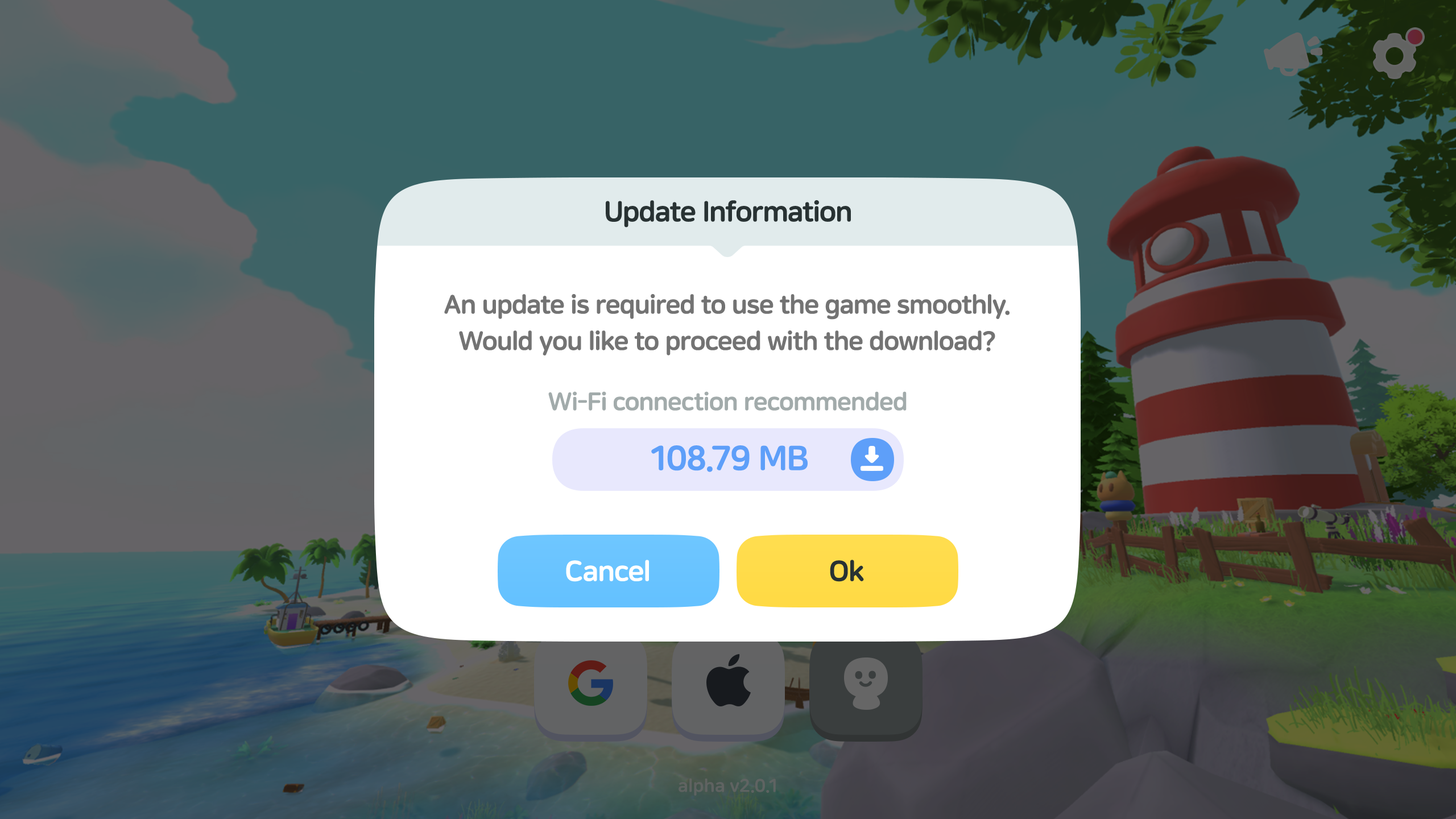
<style>
.page{position:relative;width:1456px;height:819px}
.page>*{position:absolute;margin:0}
.t1{font:28.4px "NanumSquareRoundEB";letter-spacing:-0.025em;color:#283233}
.t2{font:26.2px/36.4px "NanumSquareRoundEB";letter-spacing:-0.025em;color:#737373}
.t3{font:25px "NanumSquareRoundEB";letter-spacing:-0.025em;color:#a2abab}
.t4{font:34.1px "NanumSquareRoundEB";letter-spacing:-0.025em;color:#5e9ff9}
.t5{font:28.4px "NanumSquareRoundEB";letter-spacing:-0.025em;color:#ffffff}
</style>
<div class="page">
<p class="t1" style="left:606px;top:200px;width:245px;height:27px">Update Information</p>
<p class="t2" style="left:444px;top:294px;width:566px;height:61px;text-align:center">An update is required to use the game smoothly.<br>Would you like to proceed with the download?</p>
<p class="t3" style="left:548px;top:391px;width:359px;height:20px">Wi-Fi connection recommended</p>
<p class="t4" style="left:651px;top:445px;width:157px;height:27px">108.79 MB</p>
<p class="t5" style="left:566px;top:560px;width:83px;height:22px">Cancel</p>
<p class="t1" style="left:830px;top:560px;width:34px;height:22px">Ok</p>
</div>
